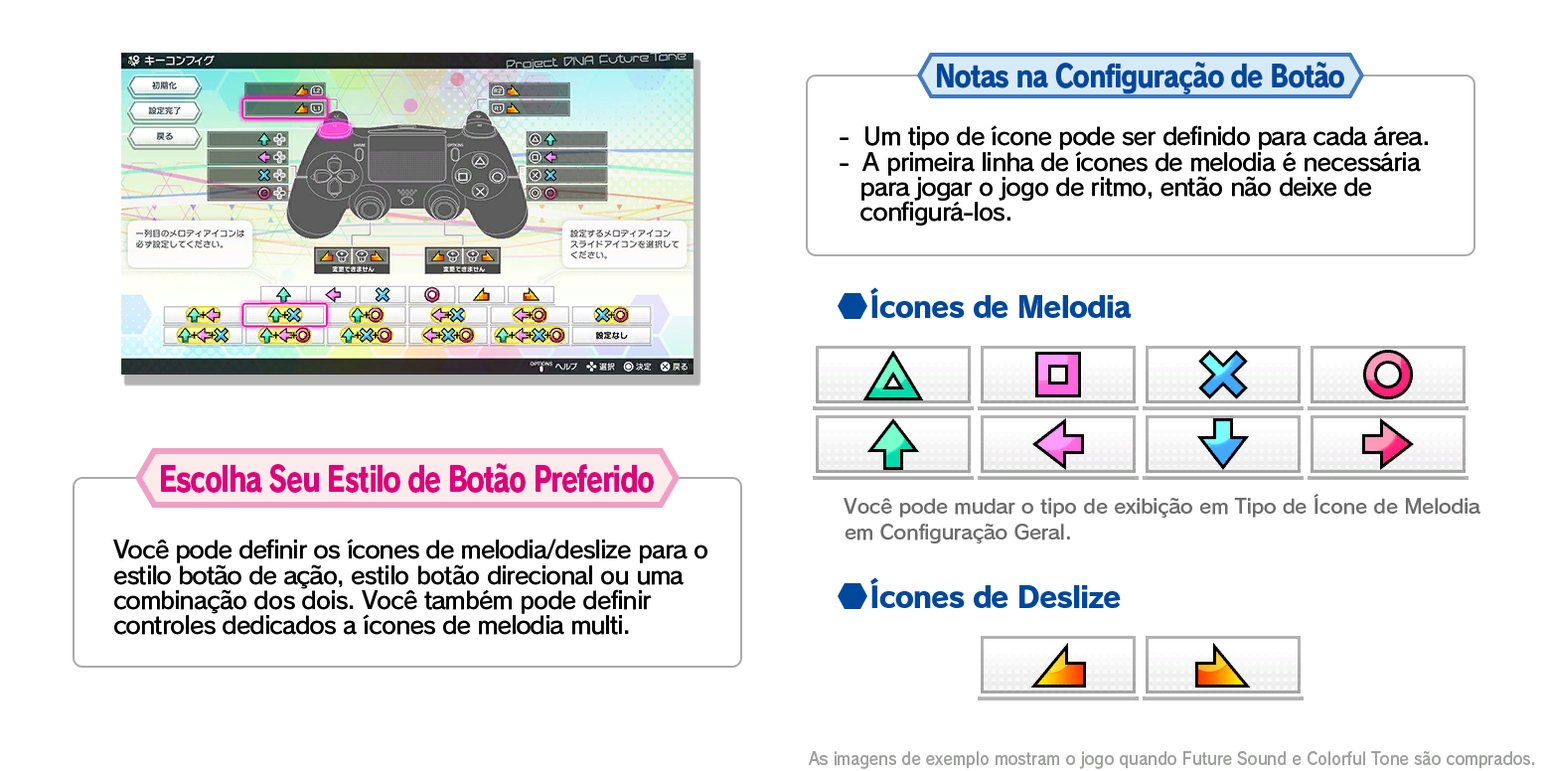
<style>
.page{position:relative;width:1546px;height:771px;background:#ffffff}
.page>*{position:absolute;margin:0}
.t1{font:30.5px "RodinPro-EB";letter-spacing:-0.048em;color:#00489c;scale:0.85 1}
.t2{font:23.9px/25.2px "RodinPro-DB";letter-spacing:-0.04em;color:#000000}
.t3{font:29.2px "RodinPro-EB";letter-spacing:-0.04em;color:#00489c}
.t4{font:34.5px "RodinPro-EB";letter-spacing:-0.048em;color:#de007b;scale:0.78 1}
.t5{font:19.9px/25.2px "RodinPro-DB";letter-spacing:-0.014em;color:#6b6c6b}
.t6{font:17.2px "RodinPro-DB";color:#9fa19f;scale:0.89 1}
</style>
<div class="page">
<p class="t1" style="left:937px;top:62px;width:408px;height:32px">Notas na Configuração de Botão</p>
<p class="t2" style="left:840px;top:125px;width:588px;height:101px">-  Um tipo de ícone pode ser definido para cada área.<br>-  A primeira linha de ícones de melodia é necessária<br>   para jogar o jogo de ritmo, então não deixe de<br>   configurá-los.</p>
<p class="t3" style="left:871px;top:287px;width:261px;height:31px">Ícones de Melodia</p>
<p class="t4" style="left:161px;top:463px;width:493px;height:30px">Escolha Seu Estilo de Botão Preferido</p>
<p class="t5" style="left:844px;top:494px;width:637px;height:50px">Você pode mudar o tipo de exibição em Tipo de Ícone de Melodia<br>em Configuração Geral.</p>
<p class="t2" style="left:113px;top:539px;width:595px;height:96px">Você pode definir os ícones de melodia/deslize para o<br>estilo botão de ação, estilo botão direcional ou uma<br>combinação dos dois. Você também pode definir<br>controles dedicados a ícones de melodia multi.</p>
<p class="t3" style="left:871px;top:577px;width:250px;height:31px">Ícones de Deslize</p>
<p class="t6" style="left:808px;top:751px;width:727px;height:18px">As imagens de exemplo mostram o jogo quando Future Sound e Colorful Tone são comprados.</p>
</div>
